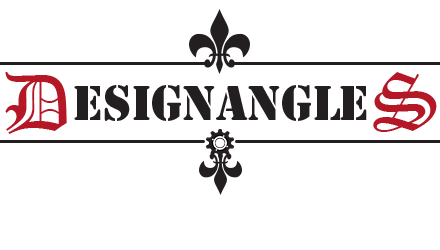
<style>
.page{position:relative;width:440px;height:250px;background:#ffffff}
.page>*{position:absolute;margin:0}
.t1{font:80px "OldEnglishTextMT";color:#b41827}
.t2{font:45px "StencilStd";color:#231f20}
</style>
<div class="page">
<p class="t1" style="left:5px;top:72px;width:62px;height:62px">D</p>
<p class="t1" style="left:373px;top:72px;width:64px;height:60px">S</p>
<p class="t2" style="left:74px;top:85px;width:293px;height:36px">esignangle</p>
</div>
